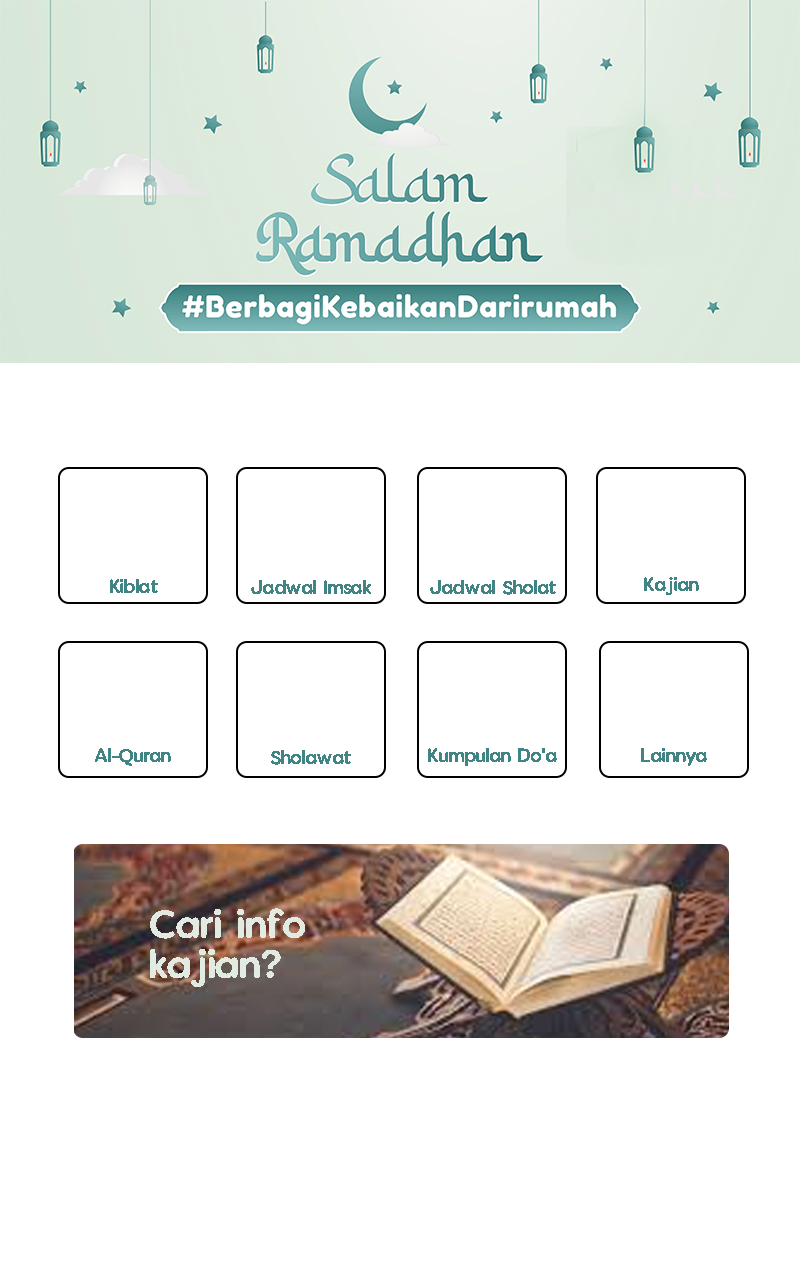
<style>
.page{position:relative;width:800px;height:1280px;background:#ffffff}
.page>*{position:absolute;margin:0}
.t1{font:16px "VanillaExtractRegular";color:#408584}
.t2{font:33.4px "VanillaExtractRegular";color:#e1ebe1}
</style>
<div class="page">
<p class="t1" style="left:110px;top:579px;width:48px;height:14px">Kiblat</p>
<p class="t1" style="left:251px;top:580px;width:120px;height:14px">Jadwal Imsak</p>
<p class="t1" style="left:430px;top:580px;width:126px;height:15px">Jadwal Sholat</p>
<p class="t1" style="left:644px;top:577px;width:55px;height:18px">Kajian</p>
<p class="t1" style="left:95px;top:748px;width:76px;height:18px">Al-Quran</p>
<p class="t1" style="left:271px;top:750px;width:80px;height:15px">Sholawat</p>
<p class="t1" style="left:428px;top:748px;width:129px;height:18px">Kumpulan Do'a</p>
<p class="t1" style="left:641px;top:748px;width:66px;height:18px">Lainnya</p>
<p class="t2" style="left:150px;top:908px;width:155px;height:79px">Cari info<br>kajian?</p>
</div>
